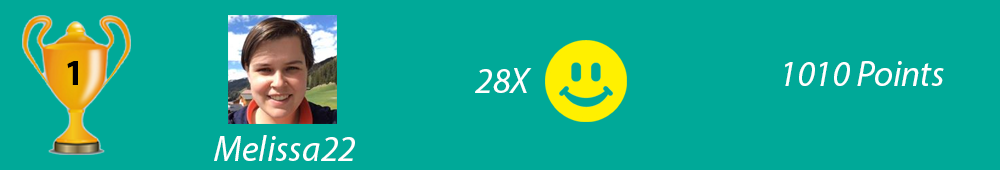
<style>
.page{position:relative;width:1000px;height:170px;background:#00a998}
.page>*{position:absolute;margin:0}
.t1{font:36px "MyriadPro-Bold";color:#000000}
.t2{font:36px "MyriadPro-It";color:#ffffff}
</style>
<div class="page">
<p class="t1" style="left:67px;top:61px;width:11px;height:24px">1</p>
<p class="t2" style="left:785px;top:61px;width:159px;height:25px">1010 Points</p>
<p class="t2" style="left:475px;top:68px;width:57px;height:25px">28X</p>
<p class="t2" style="left:214px;top:135px;width:141px;height:26px">Melissa22</p>
</div>
